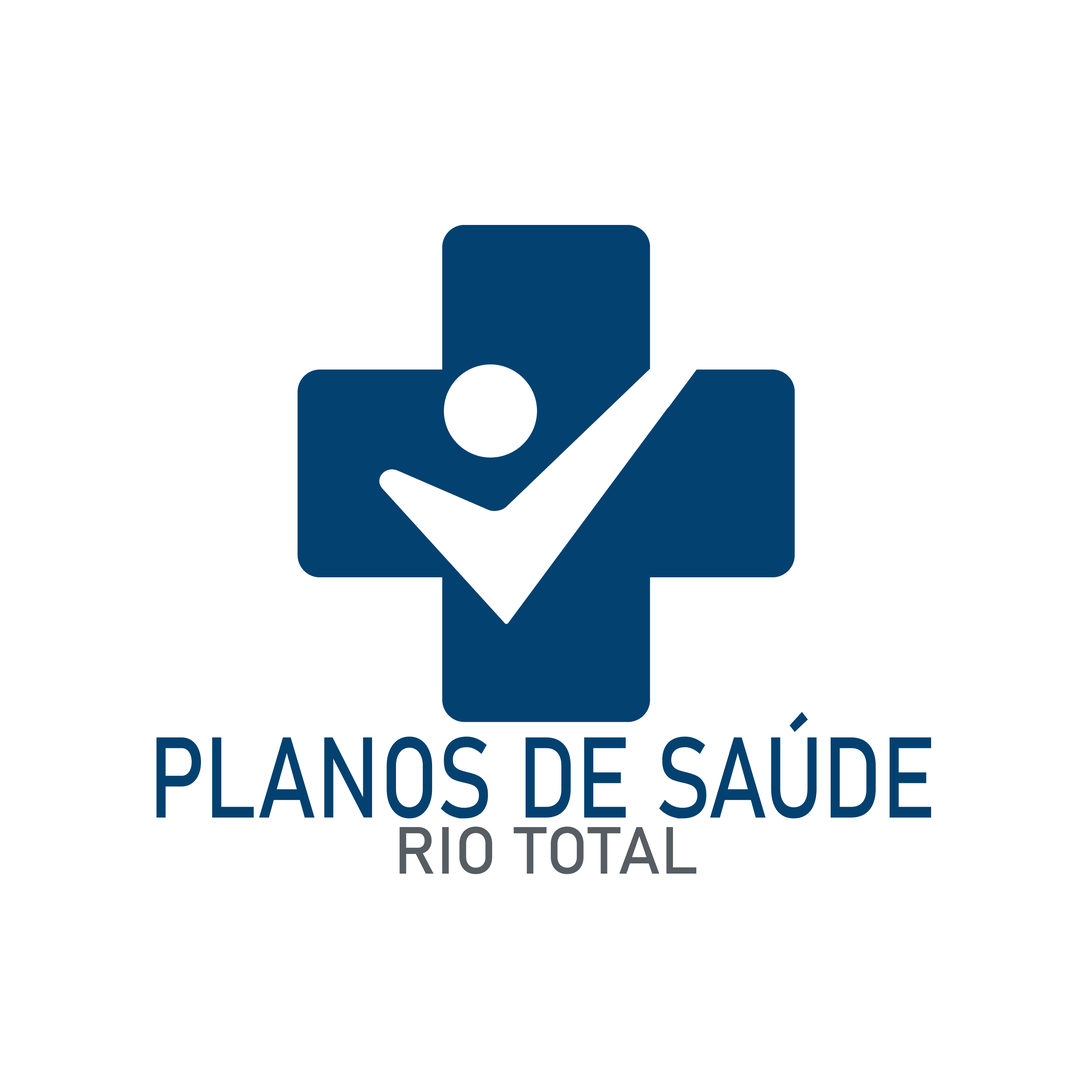
<style>
.page{position:relative;width:1092px;height:1092px;background:#ffffff}
.page>*{position:absolute;margin:0}
.t1{font:112.8px "Bahnschrift";color:#034170;scale:0.81 1}
.t2{font:65.5px "Bahnschrift";color:#565d63}
</style>
<div class="page">
<p class="t1" style="left:156px;top:712px;width:775px;height:107px">PLANOS DE SAÚDE</p>
<p class="t2" style="left:399px;top:826px;width:297px;height:48px">RIO TOTAL</p>
</div>
